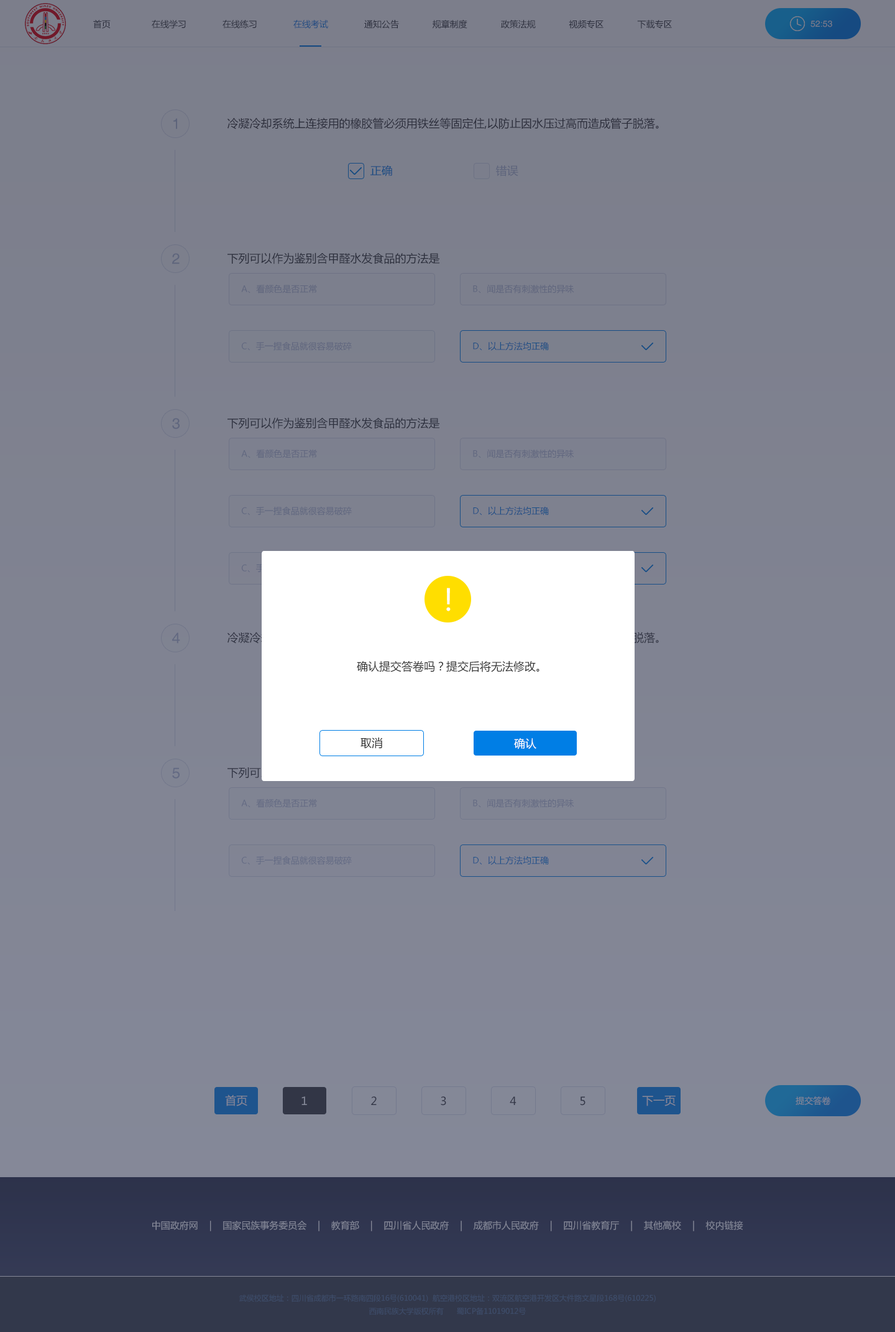
<style>
.page{position:relative;width:895px;height:1332px}
.page>*{position:absolute;margin:0}
.t1{font:8.7px "MicrosoftYaHei";color:#333333}
.t2{font:8.7px "MicrosoftYaHei";color:#007ee5}
.t3{font:8.7px "Helvetica";color:#7b7e8b}
.t4{font:14.9px "Helvetica";color:#5d647b}
.t5{font:11.2px "MicrosoftYaHei";color:#333333}
.t6{font:11.2px "MicrosoftYaHei";color:#164c82}
.t7{font:11.2px "MicrosoftYaHei";color:#5d647c}
.t8{font:14.9px "Helvetica";color:#5e657c}
.t9{font:8.7px "MicrosoftYaHei";color:#5f657d}
.t10{font:8.7px "MicrosoftYaHei";color:#5f667d}
.t11{font:8.7px "MicrosoftYaHei";color:#174d84}
.t12{font:14.9px "Helvetica";color:#5f667e}
.t13{font:8.7px "MicrosoftYaHei";color:#60667f}
.t14{font:8.7px "MicrosoftYaHei";color:#60677f}
.t15{font:8.7px "MicrosoftYaHei";color:#194e86}
.t16{font:29.8px "MicrosoftYaHei";color:#ffffff}
.t17{font:14.9px "Helvetica";color:#626981}
.t18{font:11.2px "MicrosoftYaHei";color:#ffffff}
.t19{font:14.9px "Helvetica";color:#636a83}
.t20{font:8.7px "MicrosoftYaHei";color:#636a83}
.t21{font:8.7px "MicrosoftYaHei";color:#636a84}
.t22{font:8.7px "MicrosoftYaHei";color:#1c528a}
.t23{font:11.2px "MicrosoftYaHei";color:#848897}
.t24{font:8.7px "MicrosoftYaHei";color:#848797}
.t25{font:9.3px "MicrosoftYaHei";color:#858898}
.t26{font:7.5px "MicrosoftYaHei";color:#3e4d6b}
</style>
<div class="page">
<p class="t1" style="left:93px;top:19px;width:579px;height:10px">首页                在线学习              在线练习              <span class="t2">在线考试</span>              通知公告             规章制度             政策法规             视频专区             下载专区</p>
<p class="t3" style="left:811px;top:21px;width:22px;height:6px">52:53</p>
<p class="t4" style="left:173px;top:118px;width:4px;height:11px">1</p>
<p class="t5" style="left:228px;top:118px;width:431px;height:11px">冷凝冷却系统上连接用的橡胶管必须用铁丝等固定住,以防止因水压过高而造成管子脱落。</p>
<p class="t6" style="left:371px;top:165px;width:21px;height:12px">正确</p>
<p class="t7" style="left:496px;top:165px;width:23px;height:12px">错误</p>
<p class="t8" style="left:172px;top:253px;width:8px;height:11px">2</p>
<p class="t5" style="left:228px;top:252px;width:212px;height:12px">下列可以作为鉴别含甲醛水发食品的方法是</p>
<p class="t9" style="left:241px;top:284px;width:76px;height:9px">A、看颜色是否正常</p>
<p class="t9" style="left:473px;top:284px;width:102px;height:9px">B、闻是否有刺激性的异味</p>
<p class="t10" style="left:242px;top:341px;width:110px;height:10px">C、手一捏食品就很容易破碎</p>
<p class="t11" style="left:473px;top:341px;width:76px;height:10px">D、以上方法均正确</p>
<p class="t12" style="left:172px;top:418px;width:8px;height:11px">3</p>
<p class="t5" style="left:228px;top:417px;width:212px;height:12px">下列可以作为鉴别含甲醛水发食品的方法是</p>
<p class="t13" style="left:241px;top:449px;width:76px;height:9px">A、看颜色是否正常</p>
<p class="t13" style="left:473px;top:449px;width:102px;height:9px">B、闻是否有刺激性的异味</p>
<p class="t14" style="left:242px;top:506px;width:110px;height:9px">C、手一捏食品就很容易破碎</p>
<p class="t15" style="left:473px;top:506px;width:76px;height:9px">D、以上方法均正确</p>
<p class="t16" style="left:446px;top:588px;width:5px;height:23px">!</p>
<p class="t17" style="left:172px;top:632px;width:8px;height:12px">4</p>
<p class="t5" style="left:357px;top:661px;width:183px;height:11px">确认提交答卷吗？提交后将无法修改。</p>
<p class="t5" style="left:361px;top:737px;width:21px;height:12px">取消</p>
<p class="t18" style="left:514px;top:738px;width:23px;height:11px">确认</p>
<p class="t19" style="left:172px;top:767px;width:8px;height:11px">5</p>
<p class="t20" style="left:241px;top:798px;width:76px;height:10px">A、看颜色是否正常</p>
<p class="t20" style="left:473px;top:798px;width:102px;height:10px">B、闻是否有刺激性的异味</p>
<p class="t21" style="left:242px;top:856px;width:110px;height:9px">C、手一捏食品就很容易破碎</p>
<p class="t22" style="left:473px;top:856px;width:76px;height:9px">D、以上方法均正确</p>
<p class="t23" style="left:225px;top:1094px;width:22px;height:12px">首页</p>
<p class="t23" style="left:302px;top:1096px;width:5px;height:9px">1</p>
<p class="t5" style="left:371px;top:1096px;width:6px;height:9px">2</p>
<p class="t5" style="left:441px;top:1096px;width:5px;height:9px">3</p>
<p class="t5" style="left:510px;top:1096px;width:7px;height:9px">4</p>
<p class="t5" style="left:580px;top:1096px;width:6px;height:9px">5</p>
<p class="t23" style="left:642px;top:1096px;width:34px;height:10px">下一页</p>
<p class="t24" style="left:796px;top:1096px;width:35px;height:9px">提交答卷</p>
<p class="t25" style="left:152px;top:1221px;width:592px;height:10px">中国政府网    |    国家民族事务委员会    |    教育部    |    四川省人民政府    |    成都市人民政府    |    四川省教育厅    |    其他高校    |    校内链接</p>
<p class="t26" style="left:239px;top:1294px;width:417px;height:21px;text-align:center">武侯校区地址：四川省成都市一环路南四段16号(610041)  航空港校区地址：双流区航空港开发区大件路文星段168号(610225)<br>西南民族大学版权所有      蜀ICP备11019012号</p>
</div>
